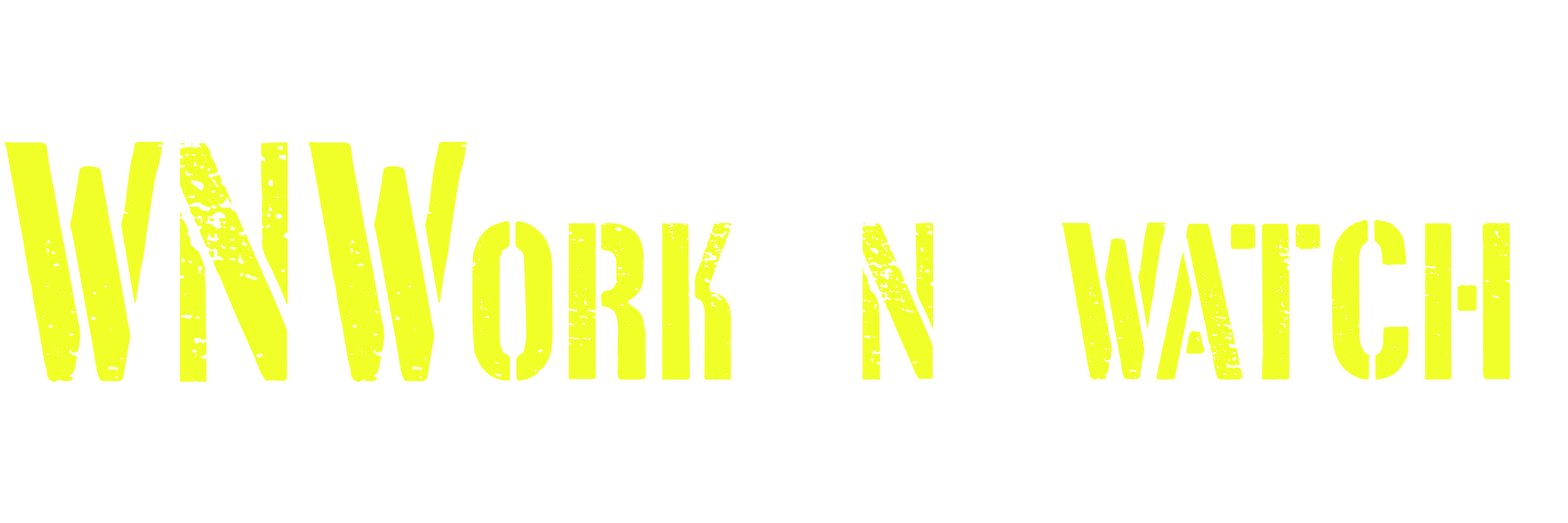
<style>
.page{position:relative;width:1568px;height:523px;background:#ffffff}
.page>*{position:absolute;margin:0}
.t1{font:338.3px "EastBorder";color:#f1ff28}
.t2{font:221.3px "EastBorder";color:#f1ff28}
</style>
<div class="page">
<p class="t1" style="left:5px;top:142px;width:462px;height:239px">WNW</p>
<p class="t2" style="left:472px;top:220px;width:1038px;height:161px">ORK ‘N’ WATCH</p>
</div>
